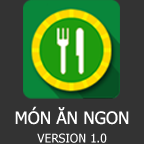
<style>
.page{position:relative;width:144px;height:144px;background:#333333}
.page>*{position:absolute;margin:0}
.t1{font:17px "Tahoma";color:#ffffff}
.t2{font:12px "Tahoma";color:#ffffff}
</style>
<div class="page">
<p class="t1" style="left:15px;top:106px;width:114px;height:19px">MÓN ĂN NGON</p>
<p class="t2" style="left:37px;top:133px;width:70px;height:10px">VERSION 1.0</p>
</div>
